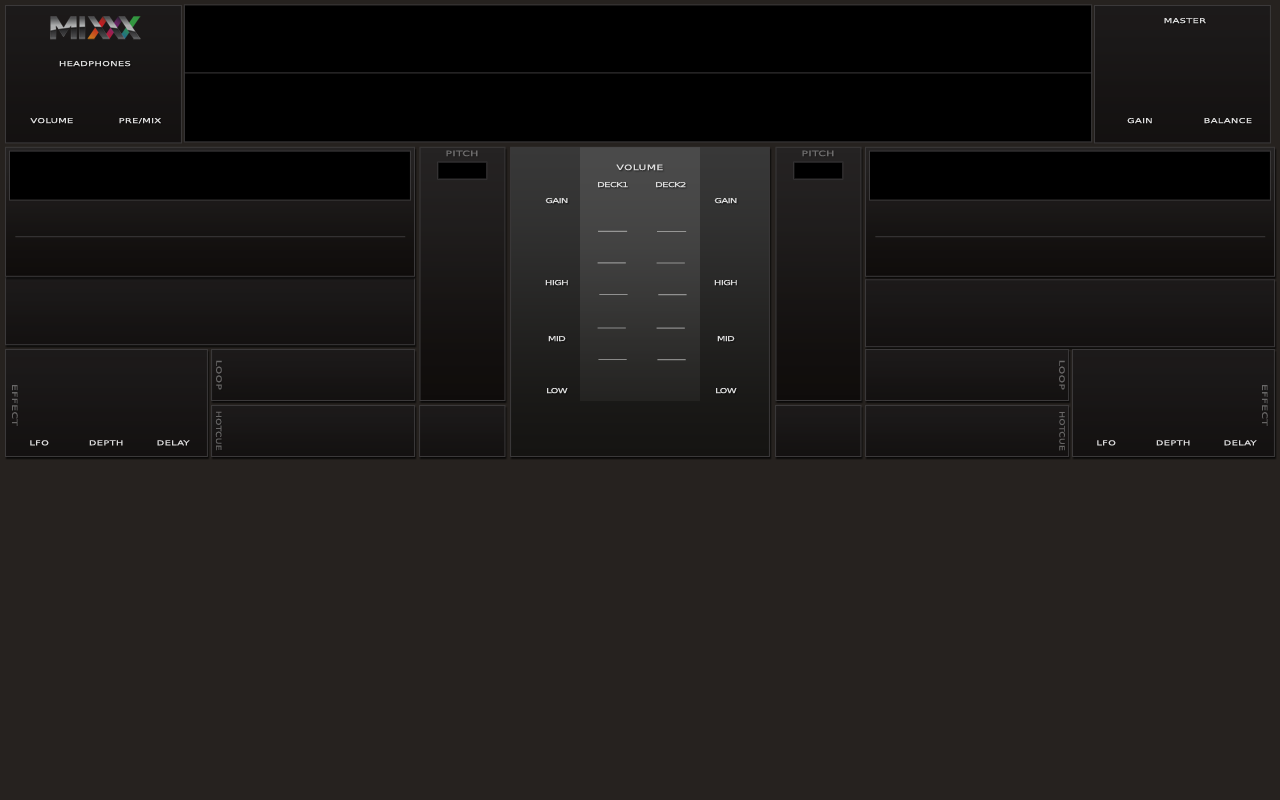
<style>
.page{position:relative;width:1280px;height:800px;background:#26221f}
.page>*{position:absolute;margin:0}
.t1{font:6.6px "DejaVuSansCondensed";color:#dddddd;font-weight:bold;scale:1.67 1}
.t2{font:7.2px "DejaVuSansCondensed";color:#6e6d6d;font-weight:bold;scale:1.68 1}
.t3{font:7.2px "DejaVuSansCondensed";color:#dddddd;font-weight:bold;scale:1.67 1}
.t4{font:6.6px "DejaVuSansCondensed";letter-spacing:-0.08em;color:#dddddd;font-weight:bold;scale:1.67 1}
.t5{font:7.2px "DejaVuSansCondensed";color:#676666;font-weight:bold;scale:1.67 1}
.t6{font:7.2px "DejaVuSansCondensed";color:#676666;font-weight:bold;scale:1.43 1}
.t7{font:7.2px "DejaVuSansCondensed";color:#676665;font-weight:bold;scale:1.43 1}
</style>
<div class="page">
<p class="t1" style="left:1164px;top:18px;width:42px;height:6px">MASTER</p>
<p class="t1" style="left:59px;top:61px;width:72px;height:6px">HEADPHONES</p>
<p class="t1" style="left:30px;top:118px;width:43px;height:6px">VOLUME</p>
<p class="t1" style="left:119px;top:118px;width:42px;height:6px">PRE/MIX</p>
<p class="t1" style="left:1127px;top:118px;width:25px;height:6px">GAIN</p>
<p class="t1" style="left:1204px;top:118px;width:48px;height:6px">BALANCE</p>
<p class="t2" style="left:446px;top:150px;width:32px;height:7px">PITCH</p>
<p class="t2" style="left:802px;top:150px;width:32px;height:7px">PITCH</p>
<p class="t3" style="left:616px;top:164px;width:47px;height:7px">VOLUME</p>
<p class="t4" style="left:598px;top:182px;width:30px;height:6px">DECK1</p>
<p class="t4" style="left:656px;top:182px;width:30px;height:6px">DECK2</p>
<p class="t4" style="left:545px;top:198px;width:23px;height:6px">GAIN</p>
<p class="t4" style="left:714px;top:198px;width:23px;height:6px">GAIN</p>
<p class="t4" style="left:545px;top:280px;width:23px;height:6px">HIGH</p>
<p class="t4" style="left:714px;top:280px;width:23px;height:6px">HIGH</p>
<p class="t4" style="left:548px;top:336px;width:18px;height:6px">MID</p>
<p class="t4" style="left:717px;top:336px;width:18px;height:6px">MID</p>
<p class="t5" style="left:216px;top:360px;width:6px;height:30px;rotate:90deg">LOOP</p>
<p class="t5" style="left:1059px;top:360px;width:6px;height:30px;rotate:90deg">LOOP</p>
<p class="t5" style="left:12px;top:385px;width:6px;height:41px;rotate:90deg">EFFECT</p>
<p class="t4" style="left:547px;top:388px;width:21px;height:6px">LOW</p>
<p class="t4" style="left:716px;top:388px;width:21px;height:6px">LOW</p>
<p class="t5" style="left:1262px;top:385px;width:6px;height:41px;rotate:90deg">EFFECT</p>
<p class="t6" style="left:215px;top:411px;width:7px;height:40px;rotate:90deg">HOTCUE</p>
<p class="t7" style="left:1059px;top:412px;width:6px;height:39px;rotate:90deg">HOTCUE</p>
<p class="t1" style="left:30px;top:440px;width:19px;height:6px">LFO</p>
<p class="t1" style="left:89px;top:440px;width:34px;height:6px">DEPTH</p>
<p class="t1" style="left:157px;top:440px;width:33px;height:6px">DELAY</p>
<p class="t1" style="left:1097px;top:440px;width:19px;height:6px">LFO</p>
<p class="t1" style="left:1156px;top:440px;width:34px;height:6px">DEPTH</p>
<p class="t1" style="left:1224px;top:440px;width:33px;height:6px">DELAY</p>
</div>
